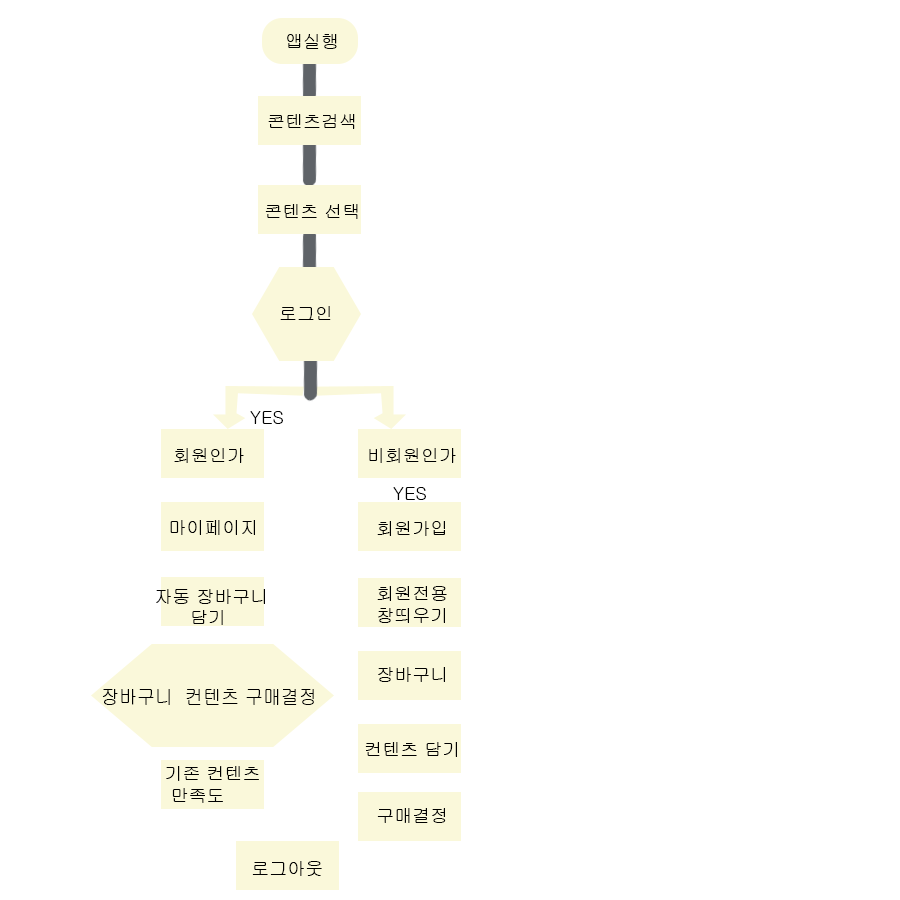
<style>
.page{position:relative;width:900px;height:900px;background:#ffffff}
.page>*{position:absolute;margin:0}
.t1{font:18px "Gulim";color:#000000}
.t2{font:20px "Gulim";color:#000000;scale:0.9 1}
</style>
<div class="page">
<p class="t1" style="left:287px;top:34px;width:50px;height:15px">앱실행</p>
<p class="t1" style="left:268px;top:114px;width:87px;height:15px">콘텐츠검색</p>
<p class="t1" style="left:265px;top:204px;width:93px;height:15px">콘텐츠 선택</p>
<p class="t1" style="left:280px;top:306px;width:51px;height:14px">로그인</p>
<p class="t1" style="left:250px;top:411px;width:33px;height:13px">YES</p>
<p class="t1" style="left:174px;top:448px;width:70px;height:15px">회원인가</p>
<p class="t1" style="left:369px;top:448px;width:87px;height:15px">비회원인가</p>
<p class="t1" style="left:393px;top:487px;width:33px;height:13px">YES</p>
<p class="t1" style="left:170px;top:520px;width:85px;height:15px">마이페이지</p>
<p class="t1" style="left:377px;top:521px;width:68px;height:15px">회원가입</p>
<p class="t1" style="left:156px;top:589px;width:109px;height:36px">자동 장바구니 <br>      담기</p>
<p class="t1" style="left:377px;top:586px;width:70px;height:37px">회원전용<br>창띄우기</p>
<p class="t1" style="left:378px;top:667px;width:67px;height:15px">장바구니</p>
<p class="t2" style="left:102px;top:689px;width:212px;height:16px">장바구니  컨텐츠 구매결정</p>
<p class="t1" style="left:365px;top:742px;width:92px;height:15px">컨텐츠 담기</p>
<p class="t1" style="left:166px;top:766px;width:93px;height:37px">기존 컨텐츠<br> 만족도</p>
<p class="t1" style="left:377px;top:808px;width:69px;height:15px">구매결정</p>
<p class="t1" style="left:252px;top:861px;width:70px;height:15px">로그아웃</p>
</div>
